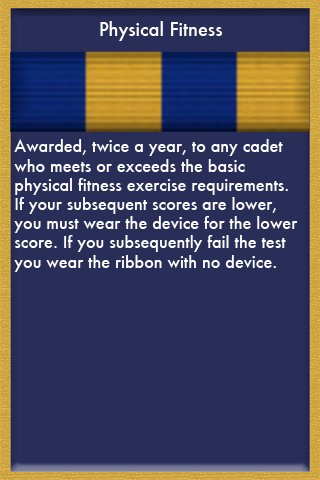
<style>
.page{position:relative;width:320px;height:480px;background:#292e59}
.page>*{position:absolute;margin:0}
.t1{font:18px "Futura-Medium";color:#ffffff}
.t2{font:16px "Futura-Medium";color:#ffffff}
</style>
<div class="page">
<p class="t1" style="left:100px;top:21px;width:123px;height:20px">Physical Fitness</p>
<p class="t2" style="left:14px;top:139px;width:284px;height:133px">Awarded, twice a year, to any cadet <br>who meets or exceeds the basic <br>physical fitness exercise requirements. <br>If your subsequent scores are lower, <br>you must wear the device for the lower <br>score. If you subsequently fail the test <br>you wear the ribbon with no device.</p>
</div>
